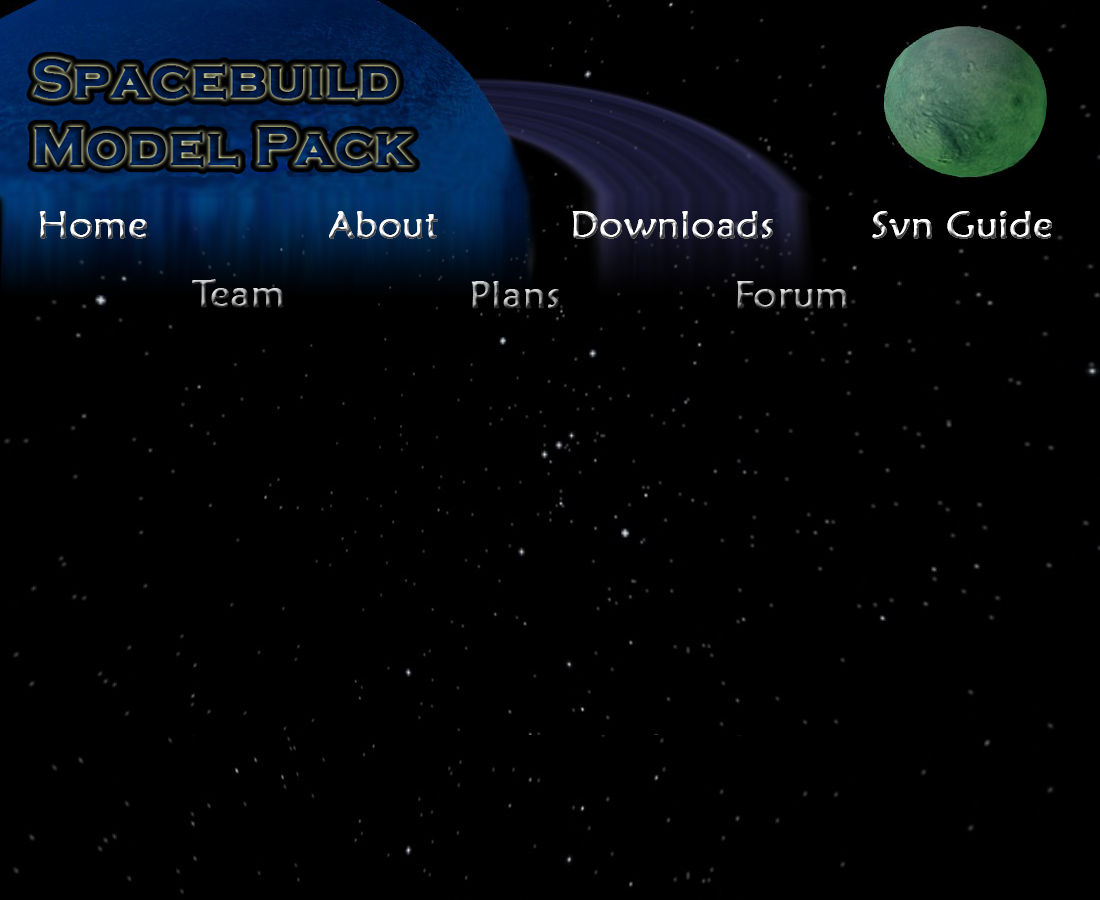
<style>
.page{position:relative;width:1100px;height:900px;background:#000000}
.page>*{position:absolute;margin:0}
.t1{font:39px "MaiandraGD-Regular";font-weight:bold}
</style>
<div class="page">
<p class="t1" style="left:39px;top:211px;width:108px;height:28px">Home</p>
<p class="t1" style="left:39px;top:211px;width:108px;height:28px">Home</p>
<p class="t1" style="left:329px;top:211px;width:109px;height:28px">About</p>
<p class="t1" style="left:329px;top:211px;width:109px;height:28px">About</p>
<p class="t1" style="left:572px;top:211px;width:201px;height:28px">Downloads</p>
<p class="t1" style="left:572px;top:211px;width:201px;height:28px">Downloads</p>
<p class="t1" style="left:872px;top:211px;width:180px;height:28px">Svn Guide</p>
<p class="t1" style="left:872px;top:211px;width:180px;height:28px">Svn Guide</p>
<p class="t1" style="left:192px;top:279px;width:92px;height:29px">Team</p>
<p class="t1" style="left:471px;top:281px;width:88px;height:28px">Plans</p>
<p class="t1" style="left:737px;top:281px;width:111px;height:28px">Forum</p>
</div>
